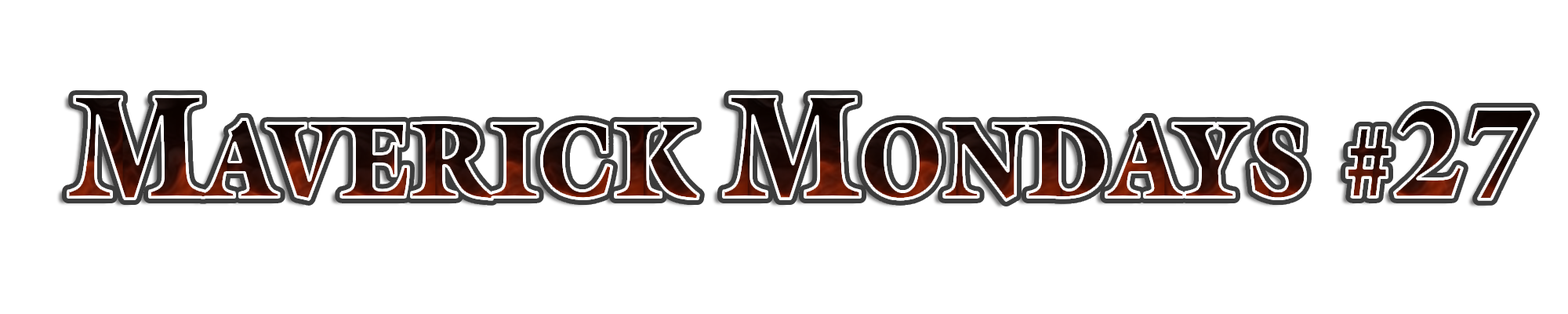
<style>
.page{position:relative;width:1568px;height:314px;background:#ffffff}
.page>*{position:absolute;margin:0}
.t1{font:108.2px "GalliardStd-Ultra";scale:0.88 1}
.t2{font:147.3px "GalliardStd-Ultra";scale:0.88 1}
.t3{font:101.7px "GalliardStd-Ultra";scale:0.88 1}
.t4{font:129px "GalliardStd-Ultra";scale:0.88 1}
</style>
<div class="page">
<p class="t1" style="left:67px;top:96px;width:1467px;height:105px"><span class="t2">M</span>AVERICK <span class="t2">M</span>ONDAYS <span class="t3">#</span><span class="t4">27</span></p>
</div>
